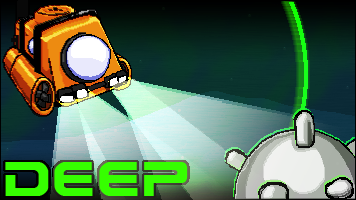
<style>
.page{position:relative;width:356px;height:200px}
.page>*{position:absolute;margin:0}
.t1{font:48px "EarthNormal";letter-spacing:0.04em;color:#36ff00}
</style>
<div class="page">
<p class="t1" style="left:5px;top:162px;width:183px;height:34px">Deep</p>
</div>
